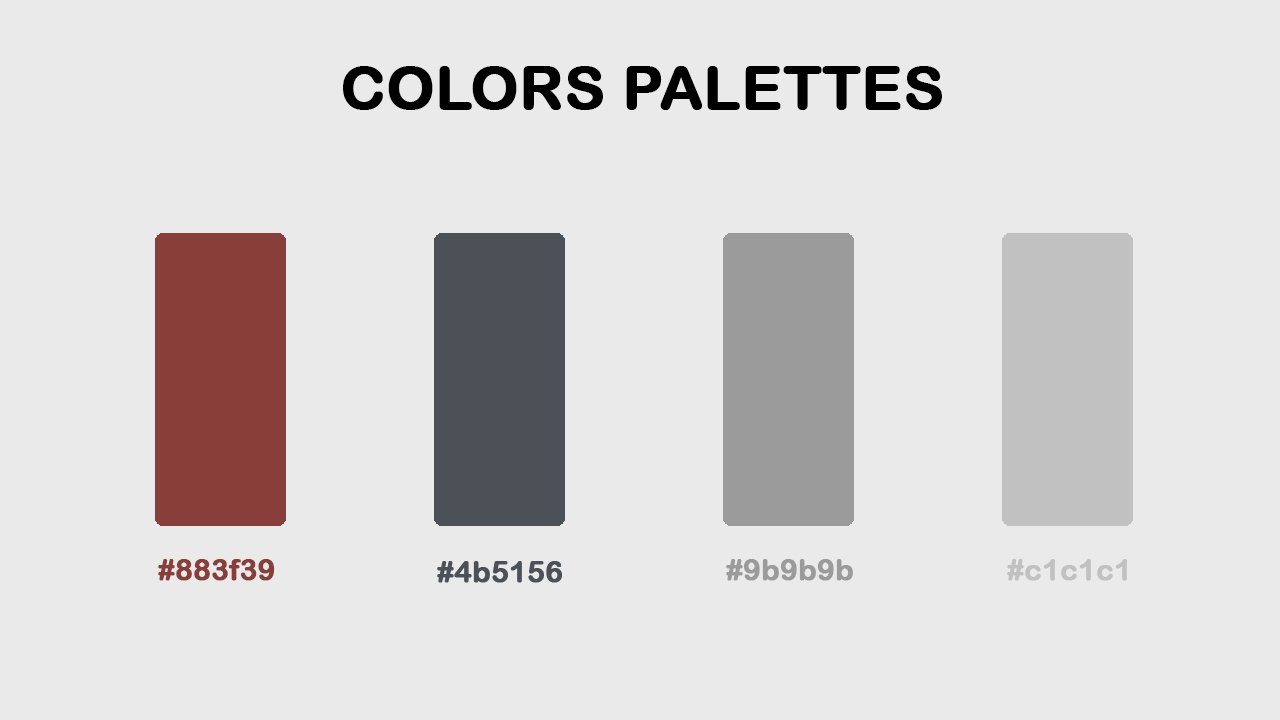
<style>
.page{position:relative;width:1280px;height:720px;background:#eaeaea}
.page>*{position:absolute;margin:0}
.t1{font:60px "ArialRoundedMTBold";color:#000000;font-weight:bold}
.t2{font:29px "ArialRoundedMTBold";color:#883f39;font-weight:bold}
.t3{font:29px "ArialRoundedMTBold";color:#9b9b9b;font-weight:bold}
.t4{font:29px "ArialRoundedMTBold";color:#c1c1c1;font-weight:bold}
</style>
<div class="page">
<p class="t1" style="left:343px;top:66px;width:599px;height:44px">COLORS PALETTES</p>
<p class="t2" style="left:158px;top:559px;width:117px;height:22px">#883f39</p>
<p class="t3" style="left:726px;top:559px;width:127px;height:22px">#9b9b9b</p>
<p class="t4" style="left:1007px;top:559px;width:120px;height:22px">#c1c1c1</p>
</div>
